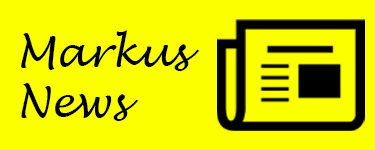
<style>
.page{position:relative;width:375px;height:150px;background:#fbff00}
.page>*{position:absolute;margin:0}
.t1{font:41.7px "LucidaHandwriting-Italic";color:#000000}
</style>
<div class="page">
<p class="t1" style="left:21px;top:30px;width:178px;height:91px">Markus <br>News</p>
</div>
